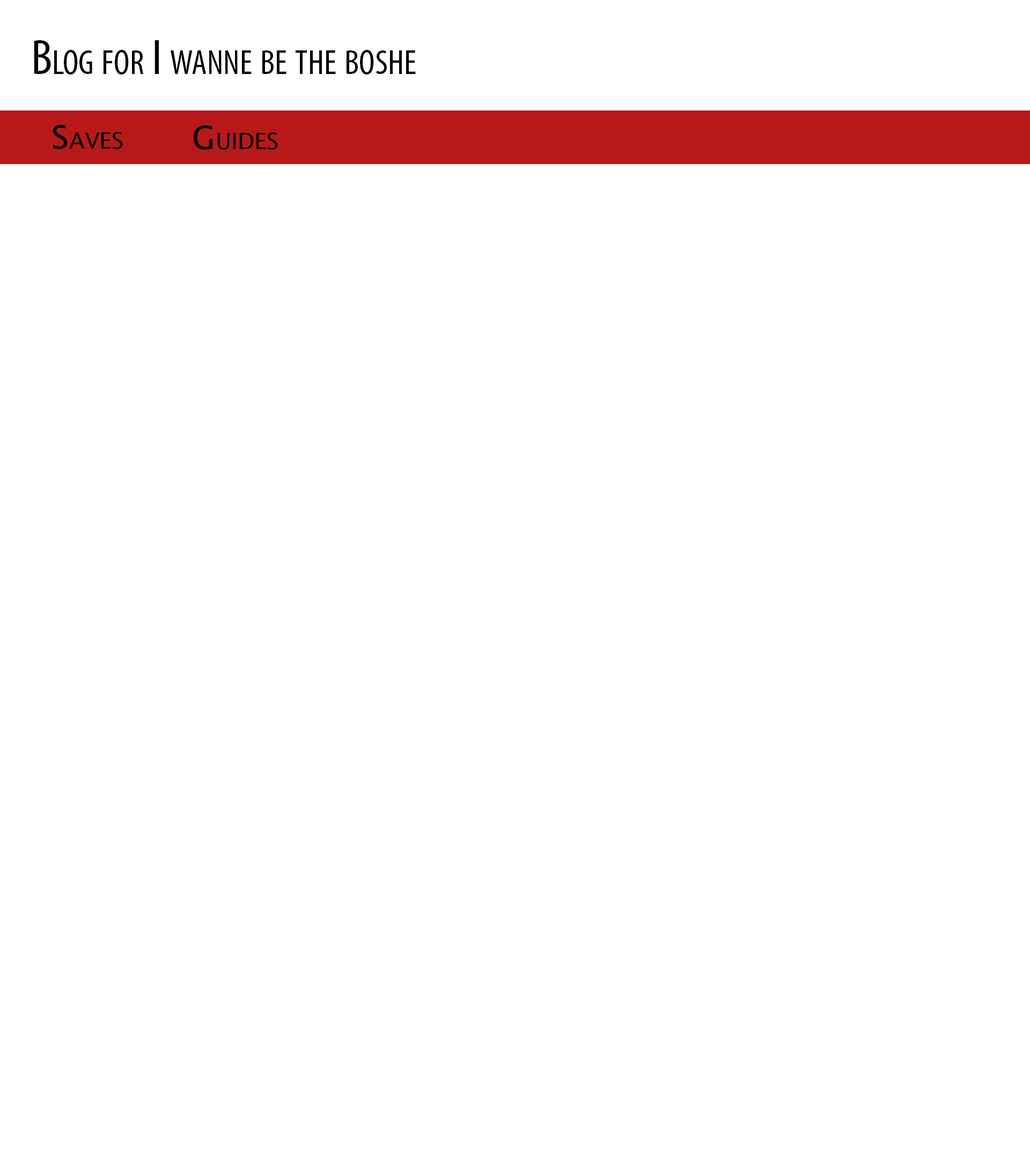
<style>
.page{position:relative;width:1030px;height:1158px;background:#ffffff}
.page>*{position:absolute;margin:0}
.t1{font:50.4px "MyriadPro-Cond";color:#000000;font-variant:small-caps}
.t2{font:32.2px "LucidaSansUnicode";color:#000000;font-variant:small-caps}
</style>
<div class="page">
<p class="t1" style="left:34px;top:40px;width:382px;height:35px">Blog for I wanne be the boshe</p>
<p class="t2" style="left:53px;top:125px;width:70px;height:24px">Saves</p>
<p class="t2" style="left:194px;top:125px;width:84px;height:25px">Guides</p>
</div>
